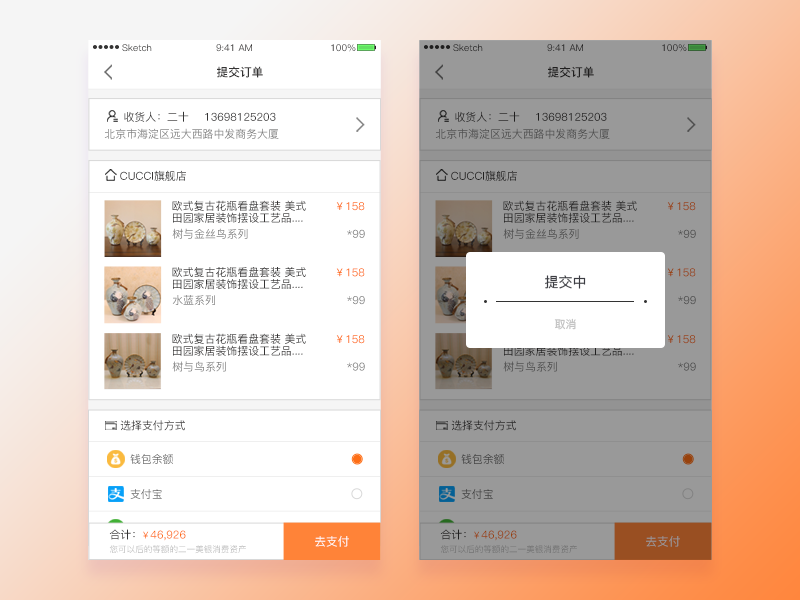
<style>
.page{position:relative;width:800px;height:600px;background:#ffffff}
.page>*{position:absolute;margin:0}
.t1{font:9.4px "PingFang-SC-Medium";color:#353434}
.t2{font:9.4px "PingFang-SC-Medium"}
.t3{font:11.7px "PingFang-SC-Bold";color:#353434}
.t4{font:10.9px "PingFang-SC-Medium";color:#353434}
.t5{font:10.9px "PingFang-SC-Medium";color:#828282}
.t6{font:10.9px "PingFang-SC-Medium";color:#4e4e4e}
.t7{font:10.9px/8.9px "PingFang-SC-Medium";color:#353434}
.t8{font:10.9px "PingFang-SC-Medium"}
.t9{font:10.9px "PingFang-SC-Medium";color:#fe6e16}
.t10{font:10.9px "PingFang-SC-Medium";color:#98420d}
.t11{font:14px "PingFang-SC-Medium";color:#3c3d43}
.t12{font:10.9px "PingFang-SC-Medium";color:#c0c0c0}
.t13{font:10.9px "PingFang-SC-Medium";color:#696969}
.t14{font:9.4px "PingFang-SC-Medium";color:#fe6e16}
.t15{font:9.4px "PingFang-SC-Medium";color:#98420d}
.t16{font:8.6px "PingFang-SC-Medium";color:#c0c0c0}
.t17{font:11.7px "PingFang-SC-Medium"}
.t18{font:8.6px "PingFang-SC-Medium"}
</style>
<div class="page">
<p class="t1" style="left:122px;top:44px;width:30px;height:8px">Sketch</p>
<p class="t1" style="left:216px;top:44px;width:36px;height:8px">9:41 AM</p>
<p class="t2" style="left:331px;top:44px;width:25px;height:8px">100%</p>
<p class="t1" style="left:453px;top:44px;width:30px;height:8px">Sketch</p>
<p class="t1" style="left:547px;top:44px;width:36px;height:8px">9:41 AM</p>
<p class="t1" style="left:662px;top:44px;width:25px;height:8px">100%</p>
<p class="t3" style="left:217px;top:66px;width:46px;height:12px">提交订单</p>
<p class="t3" style="left:548px;top:66px;width:46px;height:12px">提交订单</p>
<p class="t4" style="left:124px;top:111px;width:65px;height:11px">收货人：二十</p>
<p class="t4" style="left:205px;top:112px;width:71px;height:9px">13698125203</p>
<p class="t4" style="left:455px;top:111px;width:65px;height:11px">收货人：二十</p>
<p class="t4" style="left:536px;top:112px;width:71px;height:9px">13698125203</p>
<p class="t5" style="left:104px;top:128px;width:175px;height:11px">北京市海淀区远大西路中发商务大厦</p>
<p class="t6" style="left:435px;top:128px;width:175px;height:11px">北京市海淀区远大西路中发商务大厦</p>
<p class="t4" style="left:120px;top:170px;width:66px;height:11px">CUCCI旗舰店</p>
<p class="t4" style="left:451px;top:170px;width:66px;height:11px">CUCCI旗舰店</p>
<p class="t7" style="left:172px;top:200px;width:134px;height:23px">欧式复古花瓶看盘套装 美式<br>田园家居装饰摆设工艺品....</p>
<p class="t8" style="left:336px;top:202px;width:29px;height:9px">￥158</p>
<p class="t7" style="left:503px;top:200px;width:134px;height:23px">欧式复古花瓶看盘套装 美式<br>田园家居装饰摆设工艺品....</p>
<p class="t8" style="left:667px;top:202px;width:29px;height:9px">￥158</p>
<p class="t5" style="left:172px;top:228px;width:76px;height:11px">树与金丝鸟系列</p>
<p class="t5" style="left:347px;top:229px;width:18px;height:9px">*99</p>
<p class="t6" style="left:503px;top:228px;width:76px;height:11px">树与金丝鸟系列</p>
<p class="t6" style="left:678px;top:229px;width:18px;height:9px">*99</p>
<p class="t7" style="left:172px;top:267px;width:134px;height:23px">欧式复古花瓶看盘套装 美式<br>田园家居装饰摆设工艺品....</p>
<p class="t9" style="left:336px;top:268px;width:29px;height:9px">￥158</p>
<p class="t10" style="left:667px;top:268px;width:29px;height:9px">￥158</p>
<p class="t11" style="left:545px;top:275px;width:41px;height:14px">提交中</p>
<p class="t5" style="left:172px;top:295px;width:43px;height:10px">水蓝系列</p>
<p class="t8" style="left:347px;top:296px;width:18px;height:9px">*99</p>
<p class="t8" style="left:678px;top:296px;width:18px;height:9px">*99</p>
<p class="t12" style="left:554px;top:318px;width:22px;height:12px">取消</p>
<p class="t7" style="left:172px;top:333px;width:134px;height:23px">欧式复古花瓶看盘套装 美式<br>田园家居装饰摆设工艺品....</p>
<p class="t8" style="left:336px;top:335px;width:29px;height:9px">￥158</p>
<p class="t8" style="left:667px;top:335px;width:29px;height:9px">￥158</p>
<p class="t5" style="left:172px;top:361px;width:54px;height:11px">树与鸟系列</p>
<p class="t5" style="left:347px;top:362px;width:18px;height:9px">*99</p>
<p class="t6" style="left:503px;top:361px;width:54px;height:11px">树与鸟系列</p>
<p class="t6" style="left:678px;top:362px;width:18px;height:9px">*99</p>
<p class="t4" style="left:120px;top:420px;width:65px;height:11px">选择支付方式</p>
<p class="t4" style="left:451px;top:420px;width:65px;height:11px">选择支付方式</p>
<p class="t13" style="left:130px;top:454px;width:43px;height:10px">钱包余额</p>
<p class="t8" style="left:461px;top:454px;width:43px;height:10px">钱包余额</p>
<p class="t13" style="left:130px;top:489px;width:32px;height:10px">支付宝</p>
<p class="t8" style="left:461px;top:489px;width:32px;height:10px">支付宝</p>
<p class="t4" style="left:109px;top:529px;width:26px;height:11px">合计：</p>
<p class="t9" style="left:143px;top:530px;width:43px;height:11px"><span class="t14">￥</span>46,926</p>
<p class="t4" style="left:440px;top:529px;width:26px;height:11px">合计：</p>
<p class="t10" style="left:474px;top:530px;width:43px;height:11px"><span class="t15">￥</span>46,926</p>
<p class="t16" style="left:109px;top:545px;width:137px;height:9px">您可以后的等额的二一美银消费资产</p>
<p class="t17" style="left:315px;top:535px;width:34px;height:12px">去支付</p>
<p class="t18" style="left:440px;top:545px;width:137px;height:9px">您可以后的等额的二一美银消费资产</p>
<p class="t17" style="left:646px;top:535px;width:34px;height:12px">去支付</p>
</div>
